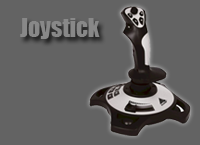
<style>
.page{position:relative;width:200px;height:145px;background:#636363}
.page>*{position:absolute;margin:0}
.t1{font:24px "Impact";color:#888888}
</style>
<div class="page">
<p class="t1" style="left:20px;top:18px;width:80px;height:21px">Joystick</p>
</div>
